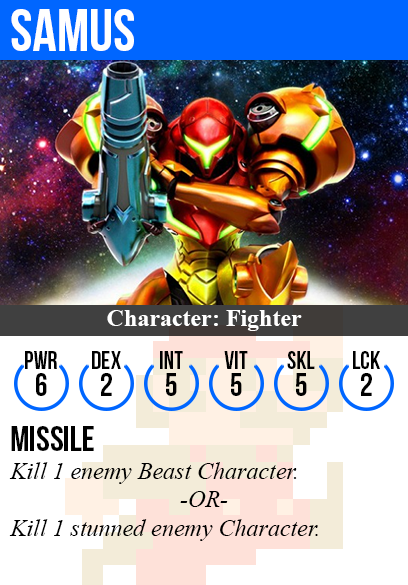
<style>
.page{position:relative;width:408px;height:585px;background:#ffffff}
.page>*{position:absolute;margin:0}
.t1{font:60px "BebasNeue";color:#ffffff}
.t2{font:24px "TimesNewRomanPS-BoldMT";color:#ffffff}
.t3{font:25px "BebasNeue";color:#000000}
.t4{font:32px "BebasNeue";color:#000000}
.t5{font:36px "BebasNeue";color:#000000}
.t6{font:24px "TimesNewRomanPS-ItalicMT";color:#000000}
</style>
<div class="page">
<p class="t1" style="left:11px;top:9px;width:123px;height:42px">samus</p>
<p class="t2" style="left:107px;top:310px;width:195px;height:21px">Character: Fighter</p>
<p class="t3" style="left:25px;top:351px;width:32px;height:18px">PWR</p>
<p class="t3" style="left:92px;top:351px;width:29px;height:18px">dex</p>
<p class="t3" style="left:160px;top:351px;width:23px;height:18px">int</p>
<p class="t3" style="left:224px;top:351px;width:24px;height:18px">vit</p>
<p class="t3" style="left:287px;top:351px;width:28px;height:18px">skl</p>
<p class="t3" style="left:353px;top:351px;width:27px;height:18px">lck</p>
<p class="t4" style="left:36px;top:373px;width:11px;height:23px">6</p>
<p class="t4" style="left:101px;top:373px;width:11px;height:23px">2</p>
<p class="t4" style="left:166px;top:373px;width:11px;height:23px">5</p>
<p class="t4" style="left:231px;top:373px;width:11px;height:23px">5</p>
<p class="t4" style="left:296px;top:373px;width:11px;height:23px">5</p>
<p class="t4" style="left:361px;top:373px;width:11px;height:23px">2</p>
<p class="t5" style="left:11px;top:426px;width:83px;height:25px">missile</p>
<p class="t6" style="left:9px;top:462px;width:309px;height:79px">Kill 1 enemy Beast Character.<br><br>Kill 1 stunned enemy Character.</p>
<p class="t6" style="left:180px;top:491px;width:48px;height:16px">-OR-</p>
</div>
